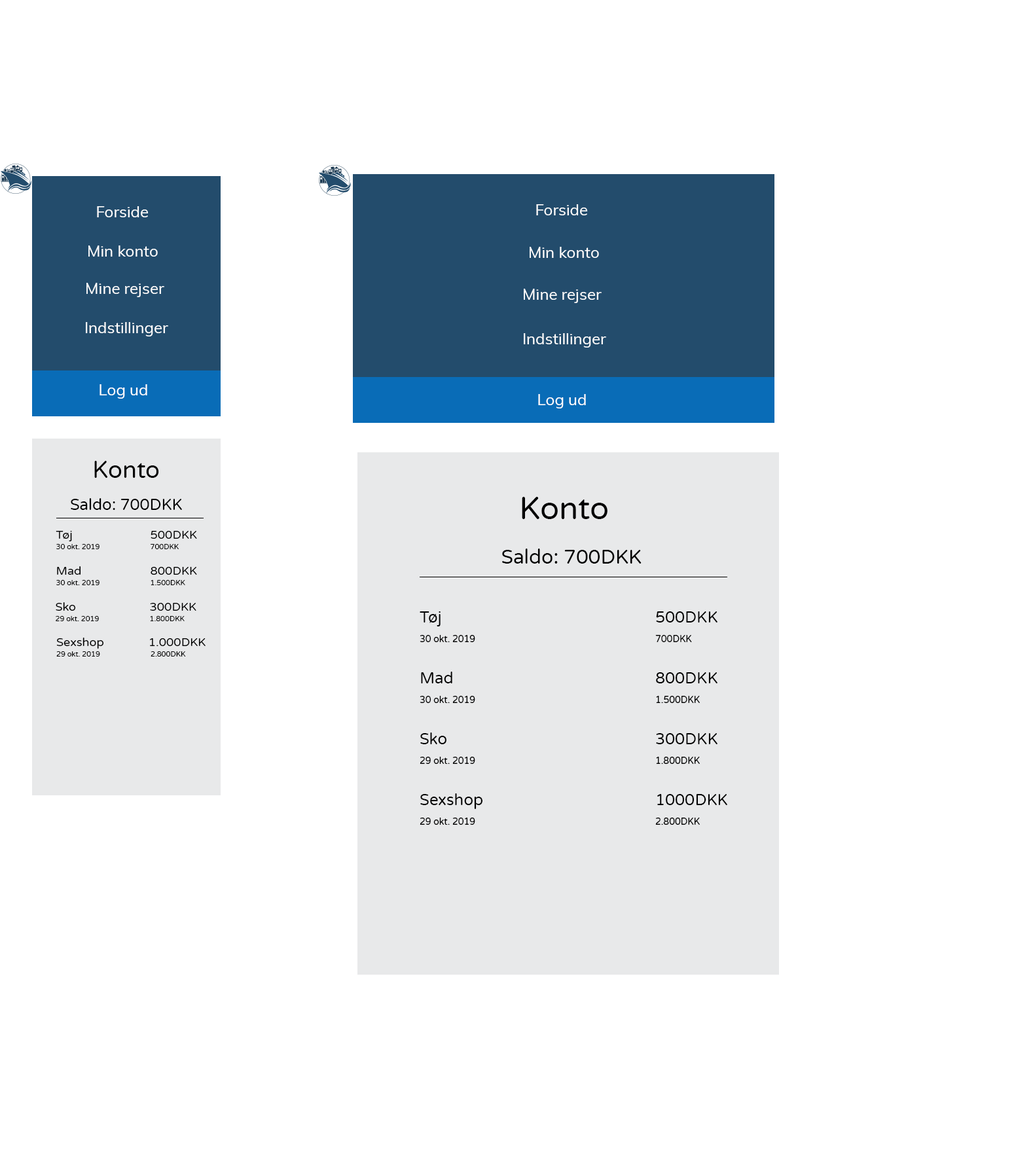
<style>
.page{position:relative;width:1016px;height:1173px;background:#ffffff}
.page>*{position:absolute;margin:0}
.t1{font:15.7px "Muli-Regular";color:#ffffff}
.t2{font:23.6px "VarelaRound-Regular";color:#000000}
.t3{font:31.4px "VarelaRound-Regular";color:#000000}
.t4{font:15.7px "VarelaRound-Regular";color:#000000}
.t5{font:7.2px/10.5px "VarelaRound-Regular";color:#000000}
.t6{font:11.8px/9.2px "VarelaRound-Regular";color:#000000}
.t7{font:19.6px "VarelaRound-Regular";color:#000000}
.t8{font:9.2px/19.6px "VarelaRound-Regular";color:#000000}
.t9{font:15.7px/19.6px "VarelaRound-Regular";color:#000000}
</style>
<div class="page">
<p class="t1" style="left:97px;top:206px;width:52px;height:11px">Forside</p>
<p class="t1" style="left:536px;top:204px;width:52px;height:11px">Forside</p>
<p class="t1" style="left:88px;top:246px;width:70px;height:11px">Min konto</p>
<p class="t1" style="left:530px;top:247px;width:69px;height:11px">Min konto</p>
<p class="t1" style="left:86px;top:283px;width:78px;height:14px">Mine rejser</p>
<p class="t1" style="left:524px;top:289px;width:78px;height:14px">Mine rejser</p>
<p class="t1" style="left:86px;top:322px;width:82px;height:15px">Indstillinger</p>
<p class="t1" style="left:524px;top:333px;width:82px;height:15px">Indstillinger</p>
<p class="t1" style="left:100px;top:384px;width:47px;height:15px">Log ud</p>
<p class="t1" style="left:538px;top:394px;width:48px;height:15px">Log ud</p>
<p class="t2" style="left:94px;top:461px;width:65px;height:17px">Konto</p>
<p class="t3" style="left:522px;top:497px;width:86px;height:22px">Konto</p>
<p class="t4" style="left:71px;top:498px;width:111px;height:12px">Saldo: 700DKK</p>
<p class="t5" style="left:56px;top:531px;width:141px;height:18px;text-align:center"><span class="t6">Tøj     500DKK <br></span>30 okt. 2019   700DKK</p>
<p class="t7" style="left:502px;top:549px;width:140px;height:15px">Saldo: 700DKK</p>
<p class="t5" style="left:56px;top:566px;width:141px;height:19px;text-align:center"><span class="t6">Mad    800DKK <br></span>30 okt. 2019   1.500DKK</p>
<p class="t5" style="left:56px;top:602px;width:140px;height:19px;text-align:center"><span class="t6">Sko    300DKK <br></span>29 okt. 2019   1.800DKK</p>
<p class="t8" style="left:420px;top:612px;width:298px;height:30px"><span class="t9">Tøj          500DKK<br></span>30 okt. 2019        700DKK</p>
<p class="t5" style="left:56px;top:638px;width:150px;height:19px;text-align:center"><span class="t6">Sexshop      1.000DKK<br></span>29 okt. 2019   2.800DKK</p>
<p class="t8" style="left:420px;top:672px;width:298px;height:31px"><span class="t9">Mad         800DKK<br></span>30 okt. 2019        1.500DKK</p>
<p class="t8" style="left:420px;top:733px;width:298px;height:31px"><span class="t9">Sko         300DKK<br></span>29 okt. 2019        1.800DKK</p>
<p class="t8" style="left:420px;top:794px;width:307px;height:31px"><span class="t9">Sexshop        1000DKK<br></span>29 okt. 2019        2.800DKK</p>
</div>
